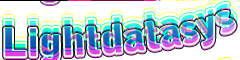
<style>
.page{position:relative;width:240px;height:60px;background:#ffffff}
.page>*{position:absolute;margin:0}
.t1{font:38px "BellGothicStd-Black";scale:1.1 1}
</style>
<div class="page">
<p class="t1" style="left:5px;top:4px;width:230px;height:51px">Lightdatasys</p>
<p class="t1" style="left:5px;top:4px;width:230px;height:51px">Lightdatasys</p>
</div>
